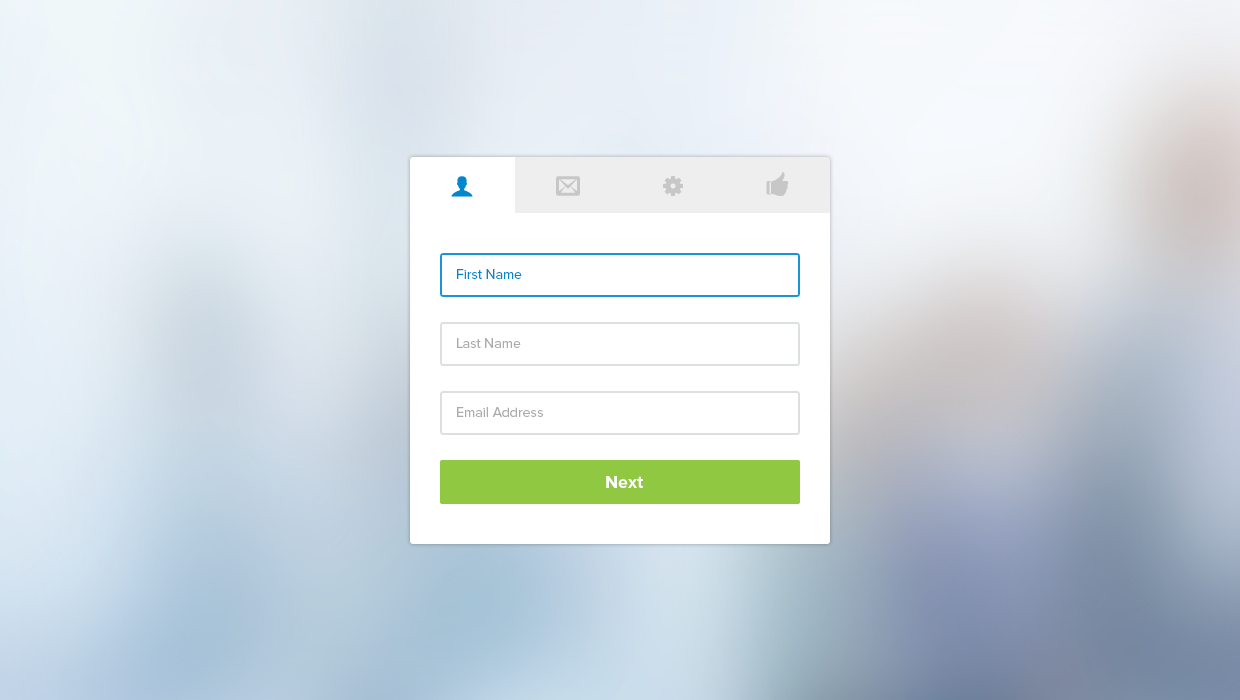
<style>
.page{position:relative;width:1240px;height:700px}
.page>*{position:absolute;margin:0}
.t1{font:14px "ProximaNova-Regular";color:#0287cc}
.t2{font:14px "ProximaNova-Regular";color:#ababab}
.t3{font:18px "ProximaNova-Bold";color:#ffffff}
</style>
<div class="page">
<p class="t1" style="left:457px;top:269px;width:65px;height:10px">First Name</p>
<p class="t2" style="left:457px;top:338px;width:64px;height:10px">Last Name</p>
<p class="t2" style="left:457px;top:407px;width:86px;height:10px">Email Address</p>
<p class="t3" style="left:606px;top:476px;width:37px;height:12px">Next</p>
</div>
